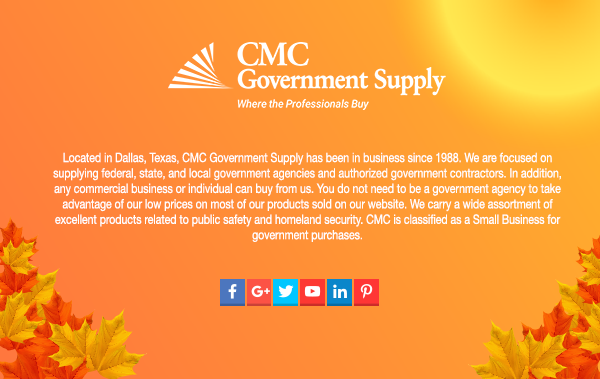
<style>
.page{position:relative;width:600px;height:379px}
.page>*{position:absolute;margin:0}
.t1{font:12.9px "HelveticaNeue";color:#ffffff;scale:0.82 1}
</style>
<div class="page">
<p class="t1" style="left:53px;top:152px;width:508px;height:90px;text-align:center">Located in Dallas, Texas, CMC Government Supply has been in business since 1988. We are focused on supplying federal, state, and local government agencies and authorized government contractors. In addition, any commercial business or individual can buy from us. You do not need to be a government agency to take advantage of our low prices on most of our products sold on our website. We carry a wide assortment of excellent products related to public safety and homeland security. CMC is classified as a Small Business for government purchases.</p>
</div>
